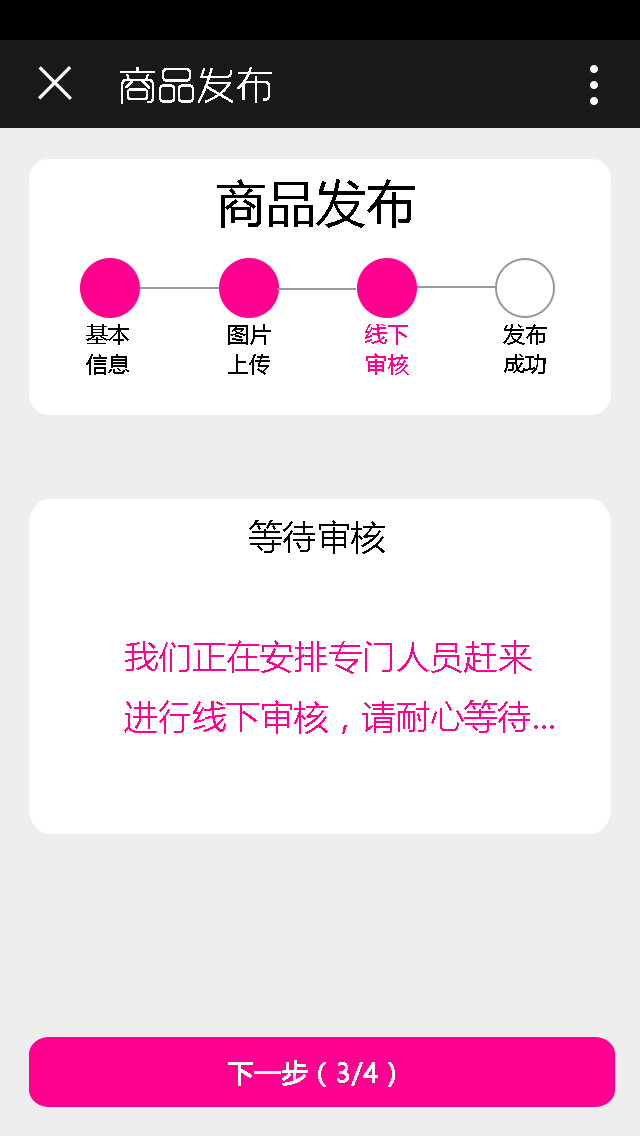
<style>
.page{position:relative;width:640px;height:1136px;background:#ffffff}
.page>*{position:absolute;margin:0}
.t1{font:38px "RTWSYueGoG0v1-ExLight";color:#ffffff;font-weight:bold}
.t2{font:50px "MicrosoftYaHei";color:#000000}
.t3{font:22px/30px "MicrosoftYaHei";color:#000000}
.t4{font:22px/30px "MicrosoftYaHei";color:#ff0090}
.t5{font:34px "MicrosoftYaHei";color:#000000}
.t6{font:34px/30px "MicrosoftYaHei";color:#ff0090}
.t7{font:26px "MicrosoftYaHei";color:#ffffff;font-weight:bold}
</style>
<div class="page">
<p class="t1" style="left:120px;top:67px;width:152px;height:37px">商品发布</p>
<p class="t2" style="left:217px;top:179px;width:198px;height:49px">商品发布</p>
<p class="t3" style="left:86px;top:324px;width:43px;height:51px">基本<br>信息</p>
<p class="t3" style="left:228px;top:324px;width:43px;height:51px">图片<br>上传</p>
<p class="t4" style="left:365px;top:324px;width:44px;height:51px">线下<br>审核</p>
<p class="t3" style="left:503px;top:324px;width:44px;height:50px">发布<br>成功</p>
<p class="t5" style="left:249px;top:520px;width:136px;height:34px">等待审核</p>
<p class="t6" style="left:124px;top:640px;width:430px;height:94px">我们正在安排专门人员赶来<br><br>进行线下审核，请耐心等待...</p>
<p class="t7" style="left:228px;top:1060px;width:167px;height:27px">下一步（3/4）</p>
</div>
